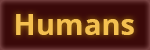
<style>
.page{position:relative;width:150px;height:50px}
.page>*{position:absolute;margin:0}
.t1{font:29.2px "NotoSansUI-Bold";color:#f4c050}
</style>
<div class="page">
<p class="t1" style="left:16px;top:14px;width:118px;height:21px">Humans</p>
</div>
